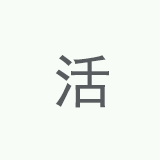
<style>
.page{position:relative;width:160px;height:160px;background:#f7fcf6}
.page>*{position:absolute;margin:0}
.t1{font:60px "SimHei";color:#585c5f}
</style>
<div class="page">
<p class="t1" style="left:55px;top:55px;width:54px;height:53px">活</p>
</div>
